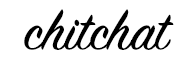
<style>
.page{position:relative;width:192px;height:68px;background:#ffffff}
.page>*{position:absolute;margin:0}
.t1{font:60px "SignPainter-HouseScript";color:#000000}
</style>
<div class="page">
<p class="t1" style="left:24px;top:9px;width:150px;height:41px">chitchat</p>
</div>
